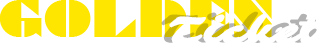
<style>
.page{position:relative;width:330px;height:45px;background:#ffffff}
.page>*{position:absolute;margin:0}
.t1{font:48px "Braggadocio";color:#fee600}
.t2{font:40px "Sarina-Regular"}
.t3{font:40px "Sarina-Regular";color:#ffffff}
</style>
<div class="page">
<p class="t1" style="left:0px;top:0px;width:272px;height:37px">GOLDEN</p>
<p class="t2" style="left:161px;top:11px;width:156px;height:32px">Ticket</p>
<p class="t3" style="left:169px;top:13px;width:157px;height:32px">Ticket</p>
</div>
